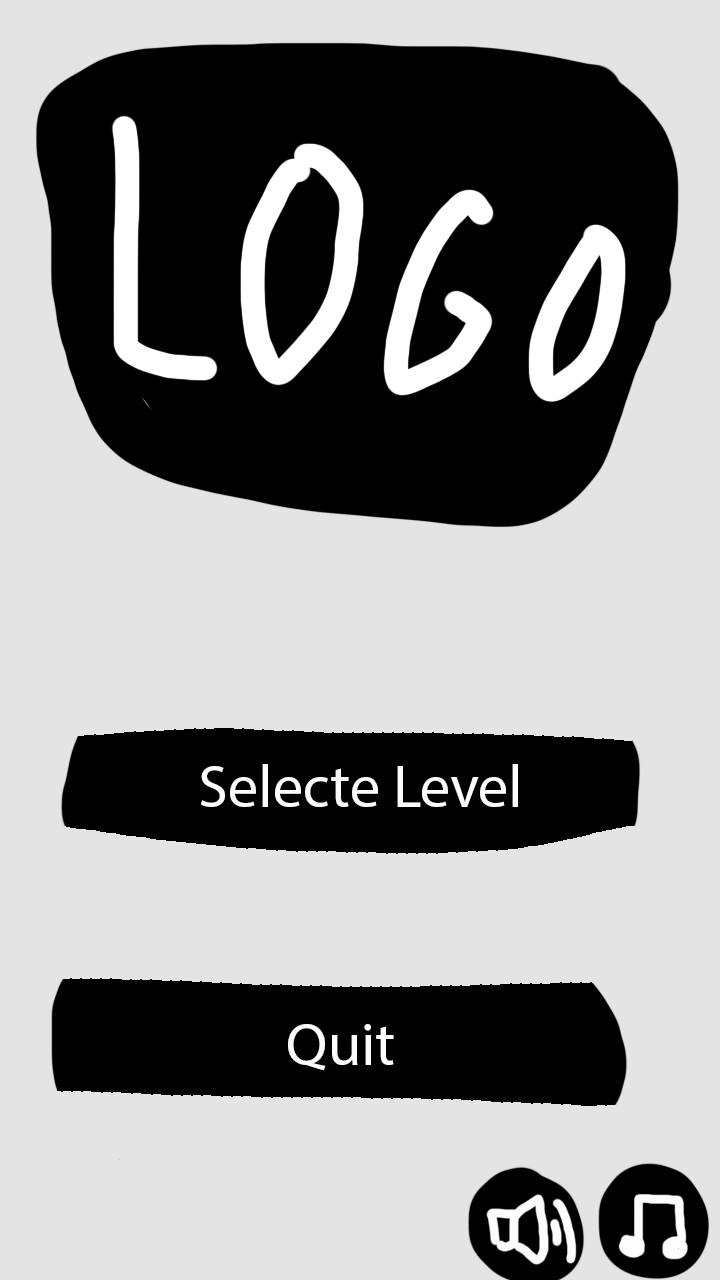
<style>
.page{position:relative;width:720px;height:1280px;background:#e4e4e4}
.page>*{position:absolute;margin:0}
.t1{font:60px "MyriadPro-Regular";color:#fffcfc}
</style>
<div class="page">
<p class="t1" style="left:201px;top:764px;width:317px;height:43px">Selecte Level</p>
<p class="t1" style="left:288px;top:1024px;width:106px;height:47px">Quit</p>
</div>
